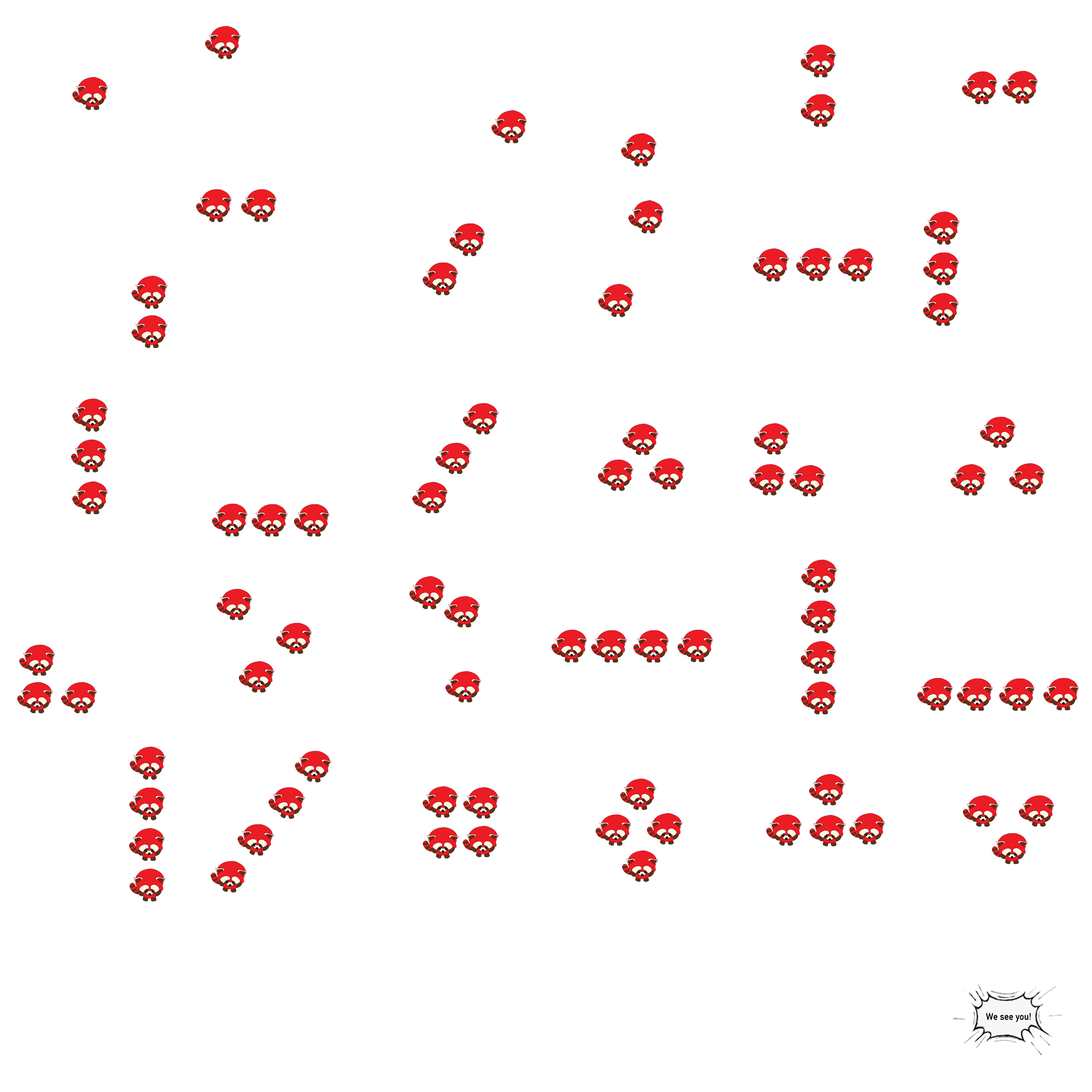
<style>
.page{position:relative;width:1092px;height:1092px;background:#ffffff}
.page>*{position:absolute;margin:0}
.t1{font:9.6px "DINAlternate-Bold";color:#000000;scale:0.95 1}
</style>
<div class="page">
<p class="t1" style="left:986px;top:1013px;width:45px;height:9px">We see you!</p>
</div>
